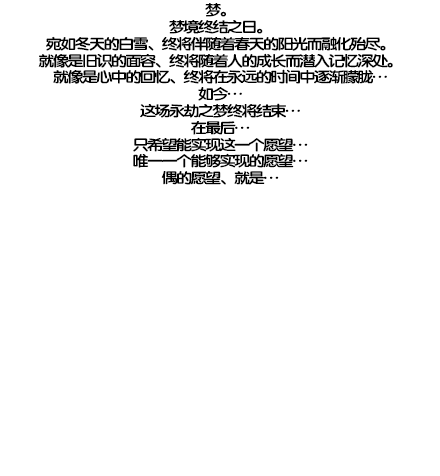
<style>
.page{position:relative;width:440px;height:476px;background:#ffffff}
.page>*{position:absolute;margin:0}
.t1{font:14.7px/16.8px "FZY4K--GBK1-0";letter-spacing:-0.13em;color:#000000;scale:1.14 1}
</style>
<div class="page">
<p class="t1" style="left:38px;top:3px;width:355px;height:182px;text-align:center">梦。<br>梦境终结之日。<br>宛如冬天的白雪、终将伴随着春天的阳光而融化殆尽。<br>就像是旧识的面容、终将随着人的成长而潜入记忆深处。<br>就像是心中的回忆、终将在永远的时间中逐渐朦胧…<br>如今…<br>这场永劫之梦终将结束…<br>在最后…<br>只希望能实现这一个愿望…<br>唯一一个能够实现的愿望…<br>偶的愿望、就是…</p>
</div>
